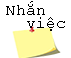
<style>
.page{position:relative;width:71px;height:58px;background:#ffffff}
.page>*{position:absolute;margin:0}
.t1{font:16px/13.3px "CourierNewPSMT";color:#000000}
</style>
<div class="page">
<p class="t1" style="left:6px;top:1px;width:59px;height:30px;text-align:center">Nhắn<br>    việc</p>
</div>
